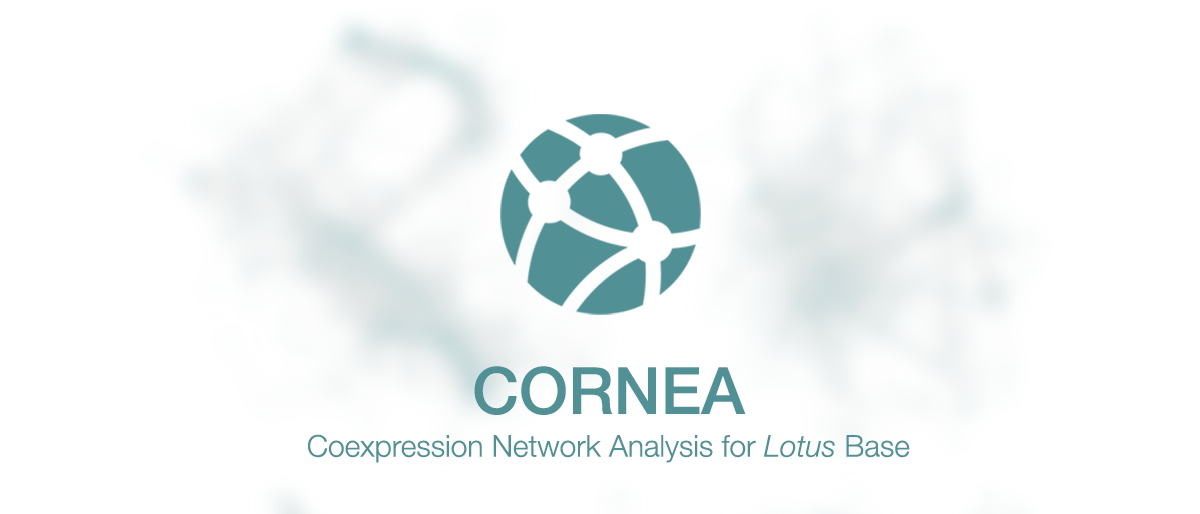
<style>
.page{position:relative;width:1200px;height:514px;background:#ffffff}
.page>*{position:absolute;margin:0}
.t1{font:30px/42.8px "HelveticaNeue-Light";color:#519094}
.t2{font:64.9px/42.8px "HelveticaNeue-Medium";color:#519094}
.t3{font:30px/42.8px "HelveticaNeue-LightItalic";color:#519094}
</style>
<div class="page">
<p class="t1" style="left:308px;top:366px;width:602px;height:97px;text-align:center"><span class="t2">CORNEA<br></span>Coexpression Network Analysis for <span class="t3">Lotus</span> Base</p>
</div>
